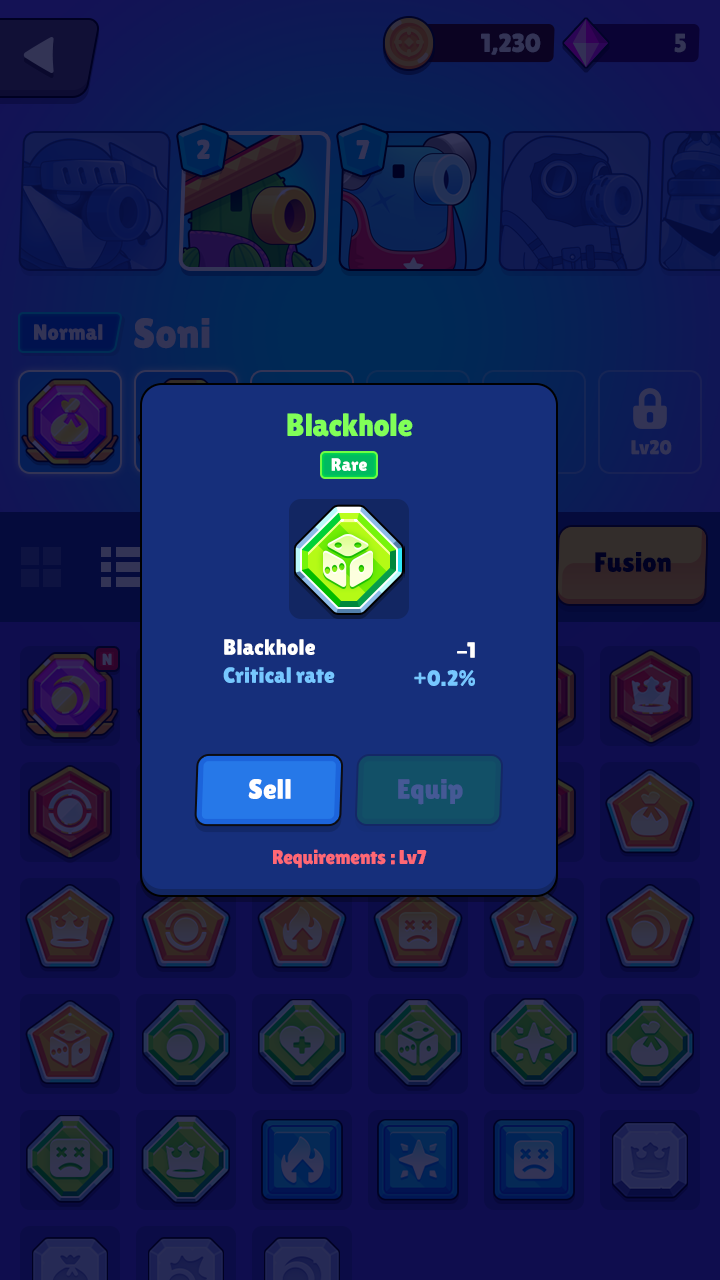
<style>
.page{position:relative;width:720px;height:1280px}
.page>*{position:absolute;margin:0}
.t1{font:32px "LilitaOne";color:#81ff58}
.t2{font:18px "LilitaOne";color:#ffffff}
.t3{font:22px/28px "LilitaOne";color:#76c7ff}
.t4{font:22px/28px "LilitaOne";color:#ffffff}
.t5{font:28px "LilitaOne";color:#ffffff}
.t6{font:28px "LilitaOne";color:#455995}
.t7{font:20px "LilitaOne";color:#ff6874}
</style>
<div class="page">
<p class="t1" style="left:287px;top:413px;width:126px;height:24px">Blackhole</p>
<p class="t2" style="left:331px;top:458px;width:36px;height:13px">Rare</p>
<p class="t3" style="left:223px;top:639px;width:112px;height:44px"><span class="t4">Blackhole<br></span>Critical rate</p>
<p class="t3" style="left:414px;top:642px;width:61px;height:44px;text-align:right"><span class="t4">-1<br></span>+0.2%</p>
<p class="t5" style="left:248px;top:779px;width:43px;height:20px">Sell</p>
<p class="t6" style="left:398px;top:779px;width:65px;height:26px">Equip</p>
<p class="t7" style="left:273px;top:849px;width:154px;height:19px">Requirements : Lv7</p>
</div>
